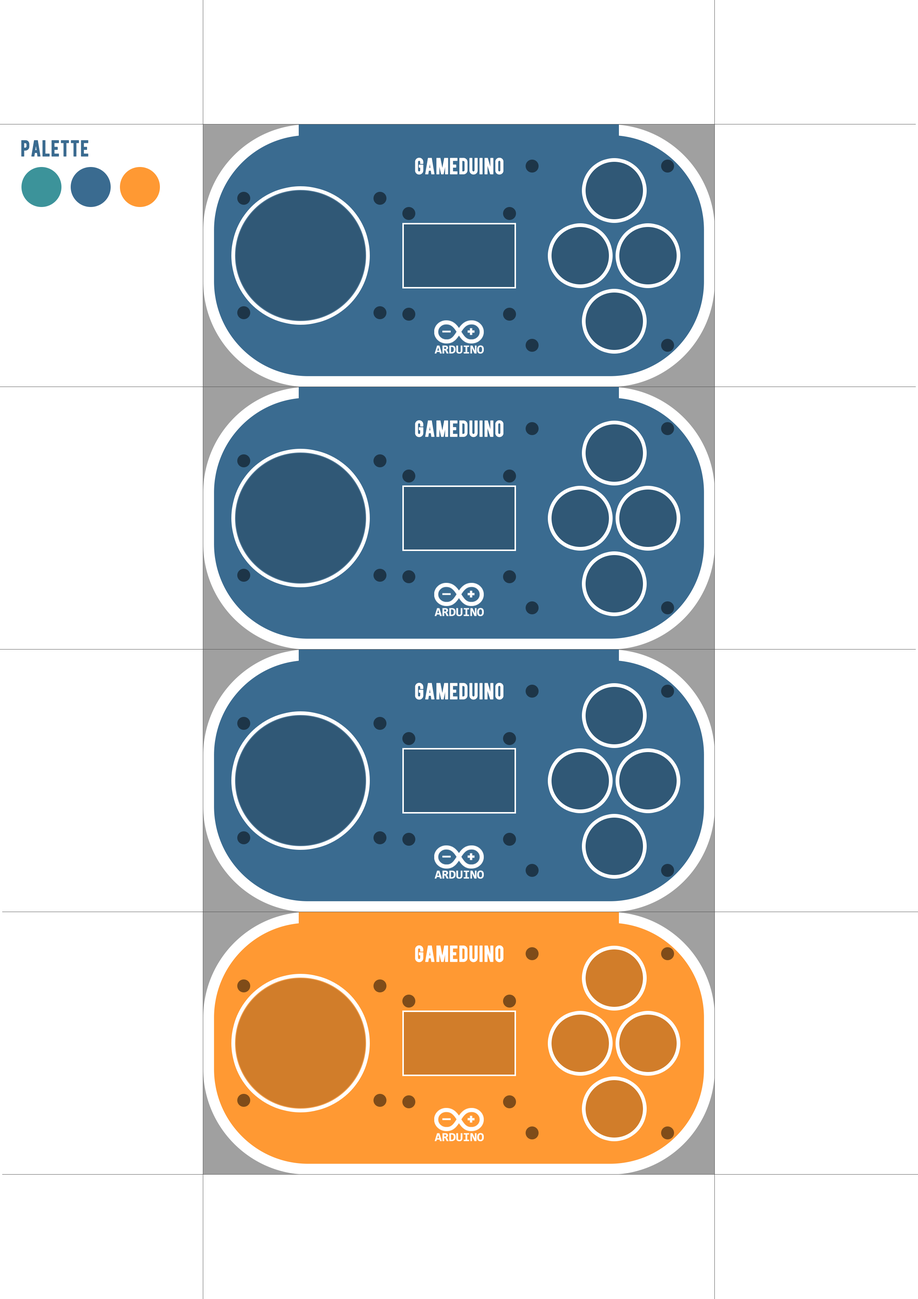
<style>
.page{position:relative;width:918px;height:1299px;background:#ffffff}
.page>*{position:absolute;margin:0}
.t1{font:17.8px "Bebas";letter-spacing:0.025em;color:#3a6b90;font-weight:bold}
.t2{font:17.8px "Bebas";letter-spacing:0.025em;color:#ffffff;font-weight:bold}
</style>
<div class="page">
<p class="t1" style="left:21px;top:140px;width:67px;height:17px">Palette</p>
<p class="t2" style="left:415px;top:158px;width:89px;height:17px">gameduino</p>
<p class="t2" style="left:415px;top:420px;width:89px;height:17px">gameduino</p>
<p class="t2" style="left:415px;top:683px;width:89px;height:17px">gameduino</p>
<p class="t2" style="left:415px;top:945px;width:89px;height:17px">gameduino</p>
</div>
